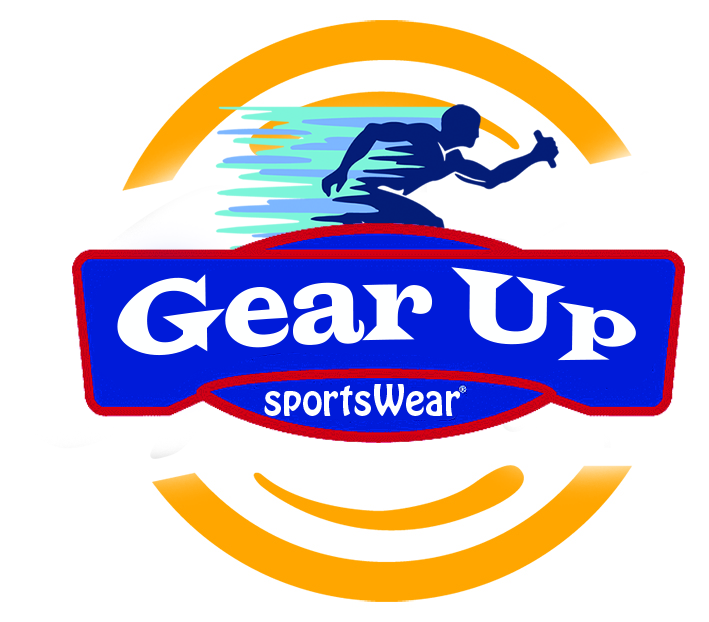
<style>
.page{position:relative;width:709px;height:622px;background:#ffffff}
.page>*{position:absolute;margin:0}
.t1{font:75px "LatinWide";color:#feffff}
.t2{font:37.5px "HoboStd";color:#feffff}
</style>
<div class="page">
<p class="t1" style="left:117px;top:267px;width:519px;height:94px">Gear Up</p>
<p class="t2" style="left:264px;top:384px;width:197px;height:32px">sportsWear</p>
</div>
